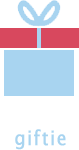
<style>
.page{position:relative;width:79px;height:150px;background:#ffffff}
.page>*{position:absolute;margin:0}
.t1{font:20px "LucidaGrande";letter-spacing:0.075em;color:#a8d4f0;font-weight:bold;scale:0.87 1}
</style>
<div class="page">
<p class="t1" style="left:15px;top:129px;width:51px;height:21px">giftie</p>
</div>
